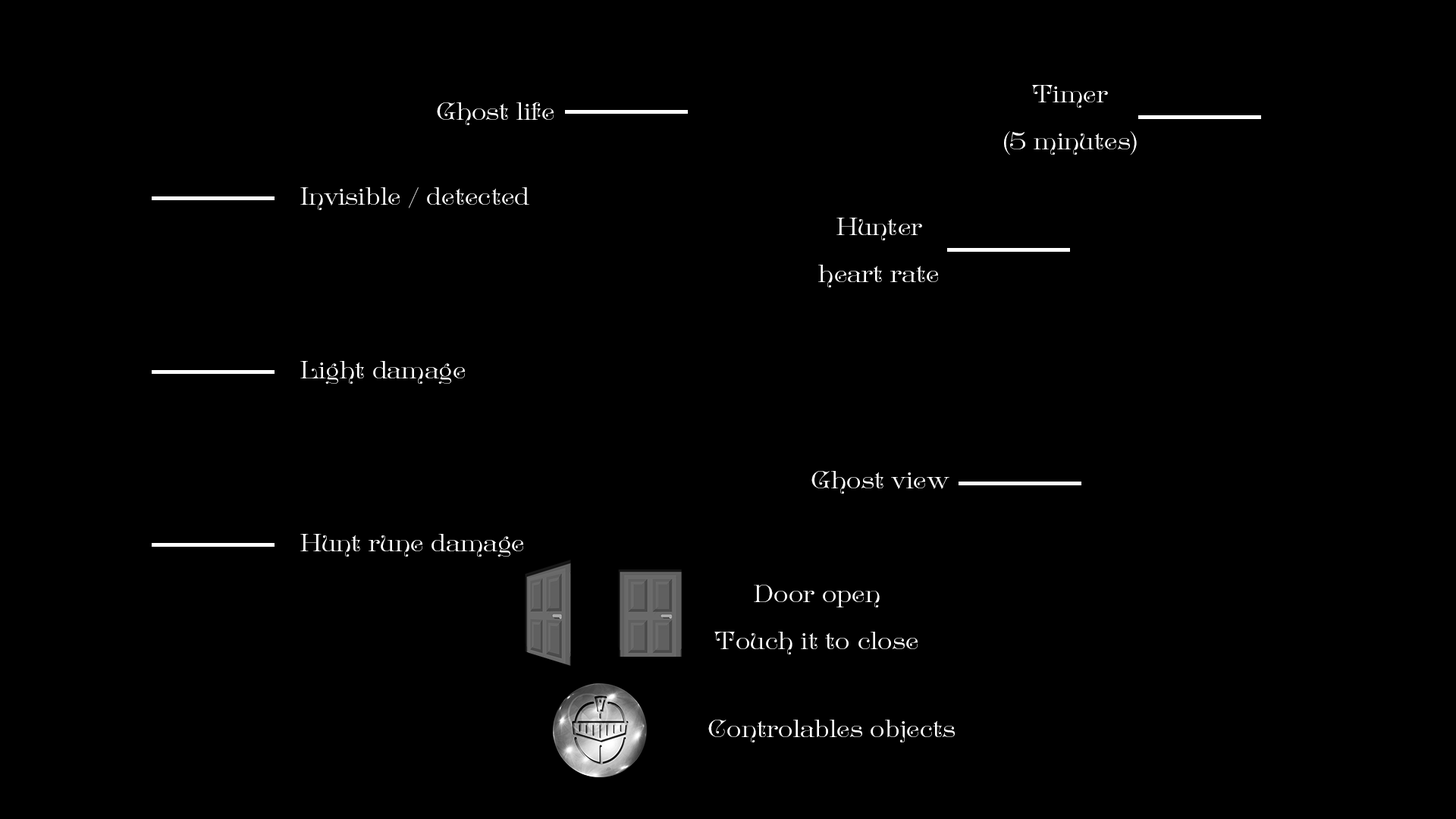
<style>
.page{position:relative;width:1456px;height:819px;background:#000000}
.page>*{position:absolute;margin:0}
.t1{font:36.4px/4.5px "GreatVictorian-Standard";color:#ffffff}
.t2{font:36.4px "GreatVictorian-Standard";color:#ffffff}
</style>
<div class="page">
<p class="t1" style="left:1004px;top:85px;width:133px;height:70px;text-align:center">Timer<br>(5 minutes)</p>
<p class="t2" style="left:437px;top:102px;width:117px;height:23px">Ghost life</p>
<p class="t2" style="left:300px;top:187px;width:229px;height:23px">Invisible / detected</p>
<p class="t1" style="left:818px;top:218px;width:120px;height:69px;text-align:center">Hunter<br>heart rate</p>
<p class="t2" style="left:300px;top:361px;width:165px;height:23px">Light damage</p>
<p class="t2" style="left:811px;top:471px;width:138px;height:23px">Ghost view</p>
<p class="t2" style="left:300px;top:534px;width:223px;height:23px">Hunt rune damage</p>
<p class="t1" style="left:714px;top:585px;width:204px;height:69px;text-align:center">Door open<br>Touch it to close</p>
<p class="t2" style="left:708px;top:720px;width:247px;height:22px">Controlables objects</p>
</div>
